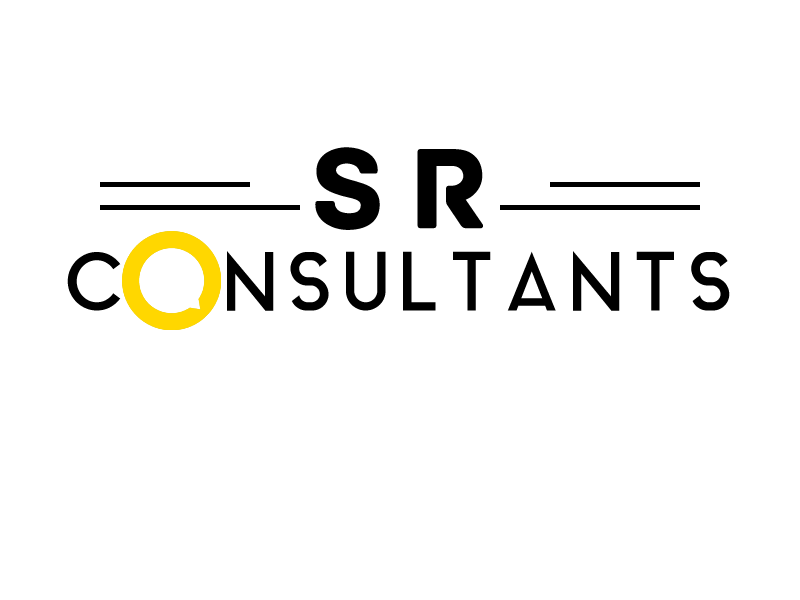
<style>
.page{position:relative;width:800px;height:600px;background:#ffffff}
.page>*{position:absolute;margin:0}
.t1{font:120px "Archive";letter-spacing:0.2em;color:#000000}
.t2{font:80px "AquaGrotesque";letter-spacing:0.06em;color:#000000}
</style>
<div class="page">
<p class="t1" style="left:315px;top:147px;width:168px;height:83px">SR</p>
<p class="t2" style="left:67px;top:251px;width:663px;height:60px">C  NSULTANTS</p>
</div>
